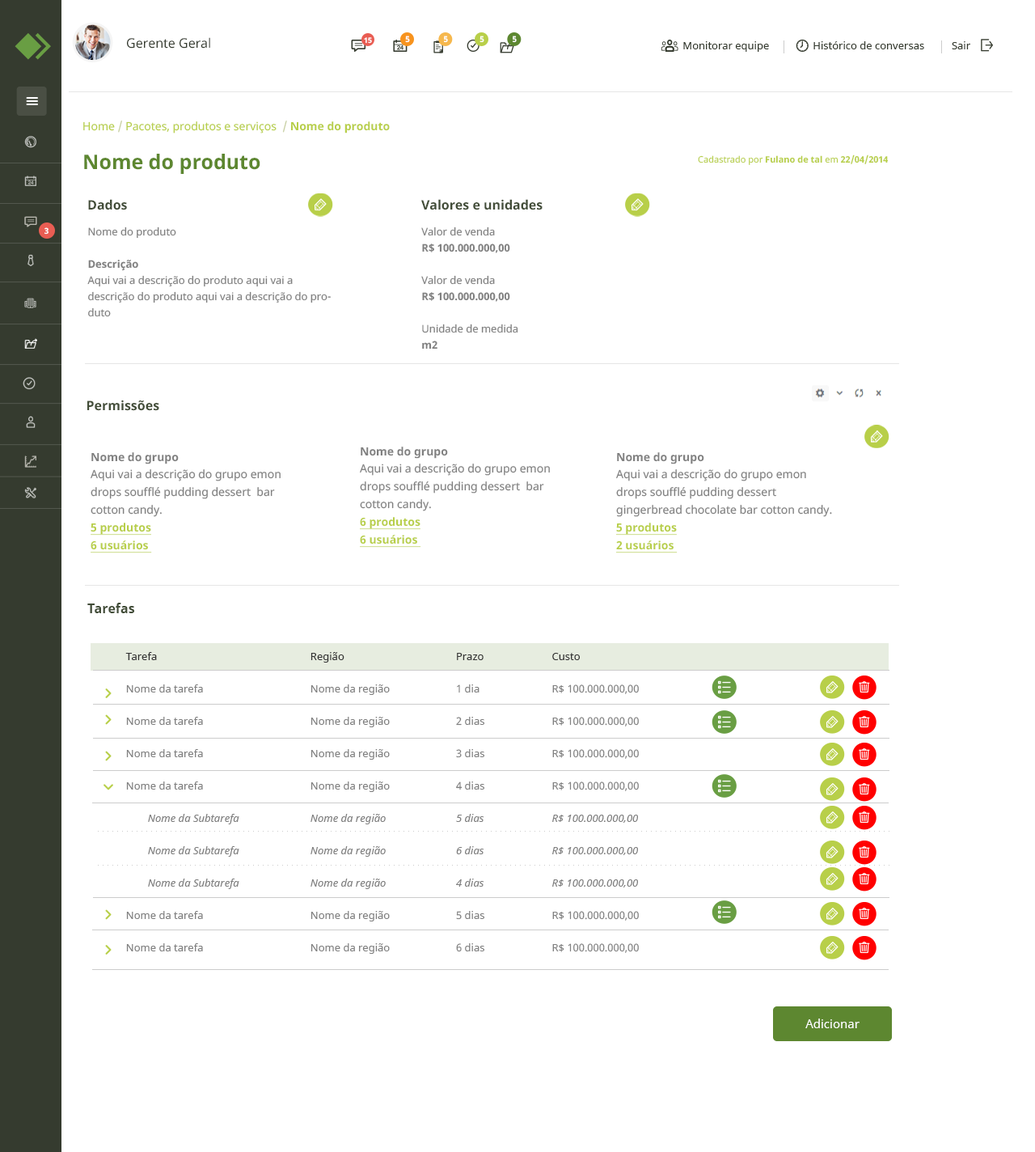
<style>
.page{position:relative;width:1035px;height:1152px;background:#ffffff}
.page>*{position:absolute;margin:0}
.t1{font:12.9px "NotoSans";color:#353b2f}
.t2{font:7.3px "NotoSans-Bold";color:#ffffff}
.t3{font:8.1px "NotoSans-Bold";color:#ffffff}
.t4{font:10.5px "NotoSans";color:#353b2f}
.t5{font:11.3px "NotoSans";color:#b8cf49}
.t6{font:11.3px "NotoSans";color:#c7cfa1}
.t7{font:11.3px "NotoSans-Bold";color:#b8cf49}
.t8{font:20.2px "NotoSans-Bold";color:#5d8730}
.t9{font:8.9px "NotoSans";color:#b8cf49}
.t10{font:8.9px "NotoSans-Bold";color:#b8cf49}
.t11{font:12.9px "NotoSans-Bold";color:#424d38}
.t12{font:10.5px/16.2px "NotoSans";color:#808080}
.t13{font:10.5px/16.2px "NotoSans-Bold";color:#808080}
.t14{font:11.3px/17.8px "NotoSans";color:#808080}
.t15{font:11.3px/32.3px "NotoSans-Bold";color:#808080}
.t16{font:11.3px/17.8px "NotoSans-Bold";color:#b8cf49;text-decoration:underline}
.t17{font:10.5px/32.4px "NotoSans-Italic";color:#808080}
.t18{font:10.5px "NotoSans";color:#333333}
.t19{font:10.5px/32.4px "NotoSans";color:#808080}
.t20{font:10.5px/32.4px "NotoSans";color:#333333}
.t21{font:12.1px "NotoSans";color:#ffffff}
</style>
<div class="page">
<p class="t1" style="left:127px;top:37px;width:83px;height:12px">Gerente Geral</p>
<p class="t2" style="left:364px;top:37px;width:8px;height:7px">15</p>
<p class="t3" style="left:405px;top:36px;width:5px;height:7px">5</p>
<p class="t3" style="left:444px;top:36px;width:4px;height:7px">5</p>
<p class="t3" style="left:480px;top:36px;width:4px;height:7px">5</p>
<p class="t3" style="left:513px;top:36px;width:4px;height:7px">5</p>
<p class="t4" style="left:683px;top:41px;width:288px;height:11px">Monitorar equipe                Histórico de conversas          Sair</p>
<p class="t5" style="left:83px;top:121px;width:307px;height:12px">Home <span class="t6">/</span> Pacotes, produtos e serviços  <span class="t6">/ </span><span class="t7">Nome do produto</span></p>
<p class="t8" style="left:84px;top:154px;width:176px;height:20px">Nome do produto</p>
<p class="t9" style="left:698px;top:154px;width:191px;height:11px">Cadastrado por<span class="t10"> Fulano de tal </span>em<span class="t10"> 22/04/2014</span></p>
<p class="t11" style="left:88px;top:199px;width:39px;height:11px">Dados</p>
<p class="t11" style="left:421px;top:199px;width:122px;height:11px">Valores e unidades</p>
<p class="t3" style="left:44px;top:227px;width:5px;height:8px">3</p>
<p class="t12" style="left:87px;top:226px;width:244px;height:91px">Nome do produto<br><br><span class="t13">Descrição<br></span>Aqui vai a descrição do produto aqui vai a descrição do produto aqui vai a descrição do produto</p>
<p class="t13" style="left:421px;top:226px;width:97px;height:123px"><span class="t12">Valor de venda<br></span>R$ 100.000.000,00<br><span class="t12"><br>Valor de venda<br></span>R$ 100.000.000,00<br><span class="t12"><br>Unidade de medida<br></span>m2</p>
<p class="t11" style="left:87px;top:400px;width:72px;height:11px">Permissões</p>
<p class="t14" style="left:360px;top:446px;width:190px;height:102px"><span class="t15">Nome do grupo<br></span>Aqui vai a descrição do grupo emon drops soufflé pudding dessert  bar cotton candy.<br><span class="t16">6 produtos<br>6 usuários</span></p>
<p class="t14" style="left:91px;top:452px;width:190px;height:101px"><span class="t15">Nome do grupo<br></span>Aqui vai a descrição do grupo emon drops soufflé pudding dessert  bar cotton candy.<br><span class="t16">5 produtos<br>6 usuários</span></p>
<p class="t14" style="left:616px;top:452px;width:216px;height:101px"><span class="t15">Nome do grupo<br></span>Aqui vai a descrição do grupo emon drops soufflé pudding dessert gingerbread chocolate bar cotton candy.<br><span class="t16">5 produtos<br>2 usuários</span></p>
<p class="t11" style="left:87px;top:603px;width:48px;height:10px">Tarefas</p>
<p class="t17" style="left:125px;top:652px;width:114px;height:299px"><span class="t18">Tarefa<br></span><span class="t19">Nome da tarefa<br>Nome da tarefa<br>Nome da tarefa<br>Nome da tarefa<br></span>        Nome da Subtarefa<br>        Nome da Subtarefa<br>        Nome da Subtarefa<br><span class="t19">Nome da tarefa<br>Nome da tarefa</span></p>
<p class="t19" style="left:311px;top:652px;width:79px;height:302px"><span class="t18">Região<br></span>Nome da região<br>Nome da região<br>Nome da região<br>Nome da região<br><span class="t17">Nome da região<br>Nome da região<br>Nome da região<br></span>Nome da região<br>Nome da região</p>
<p class="t19" style="left:456px;top:653px;width:28px;height:299px"><span class="t18">Prazo<br></span>1 dia<br>2 dias<br>3 dias<br>4 dias<br><span class="t17">5 dias<br>6 dias<br>4 dias<br></span>5 dias<br>6 dias</p>
<p class="t19" style="left:552px;top:653px;width:87px;height:300px"><span class="t20">Custo<br></span>R$ 100.000.000,00<br>R$ 100.000.000,00<br>R$ 100.000.000,00<br>R$ 100.000.000,00<br><span class="t17">R$ 100.000.000,00<br>R$ 100.000.000,00<br>R$ 100.000.000,00<br></span>R$ 100.000.000,00<br>R$ 100.000.000,00</p>
<p class="t21" style="left:806px;top:1018px;width:54px;height:10px">Adicionar</p>
</div>
